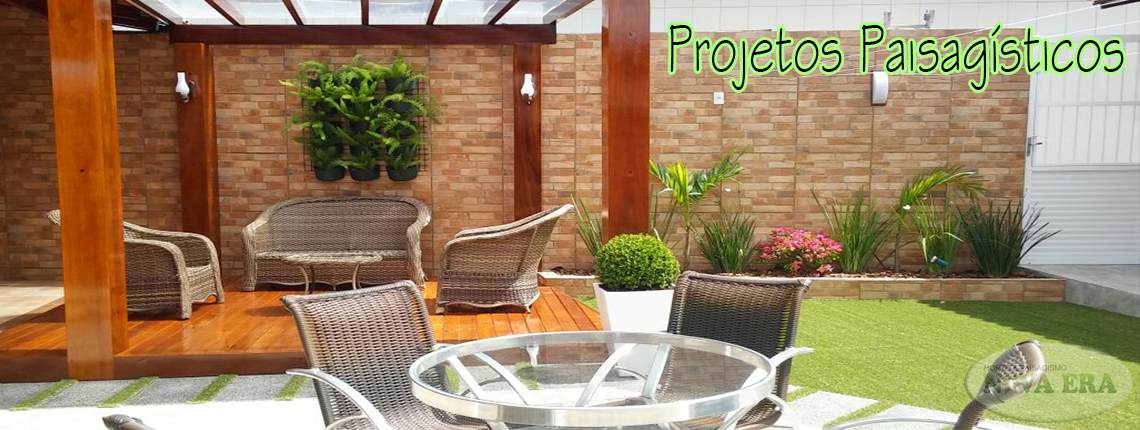
<style>
.page{position:relative;width:1140px;height:430px}
.page>*{position:absolute;margin:0}
.t1{font:69.8px "StylusBT";color:#000000;scale:0.67 1}
</style>
<div class="page">
<p class="t1" style="left:669px;top:25px;width:455px;height:65px">Projetos Paisagísticos</p>
</div>
